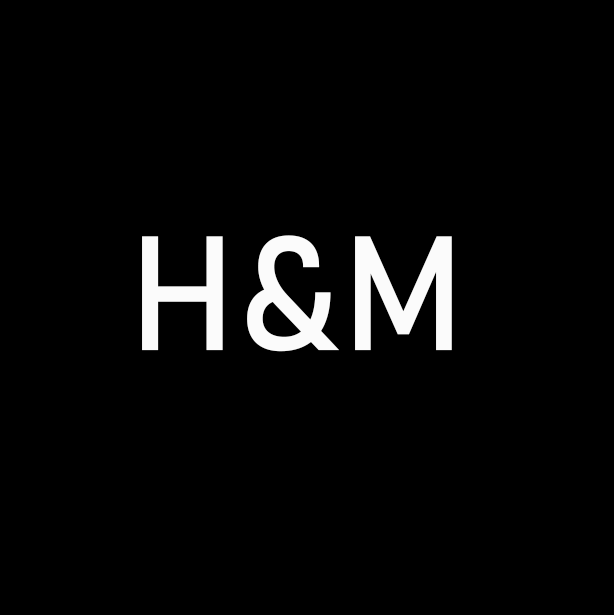
<style>
.page{position:relative;width:614px;height:615px;background:#000000}
.page>*{position:absolute;margin:0}
.t1{font:160px "Bahnschrift";color:#fbfbfb}
</style>
<div class="page">
<p class="t1" style="left:142px;top:235px;width:310px;height:117px">H&amp;M</p>
</div>
